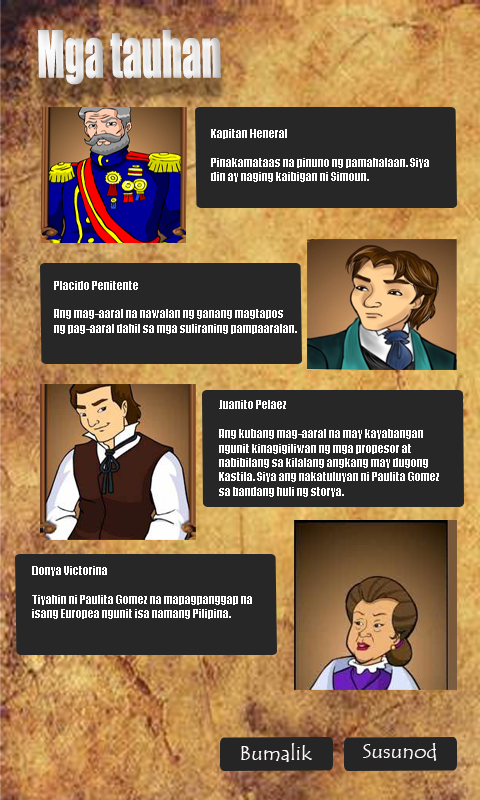
<style>
.page{position:relative;width:480px;height:800px;background:#272727}
.page>*{position:absolute;margin:0}
.t1{font:60px "Impact";color:#ffffff;scale:0.64 1}
.t2{font:12px "Impact";color:#ffffff}
.t3{font:20px "TempusSansITC";color:#fef8f8;scale:1.06 1}
</style>
<div class="page">
<p class="t1" style="left:38px;top:30px;width:183px;height:55px">Mga tauhan</p>
<p class="t2" style="left:211px;top:129px;width:218px;height:53px">Kapitan Heneral<br><br>Pinakamataas na pinuno ng pamahalaan. Siya <br>din ay naging kaibigan ni Simoun.</p>
<p class="t2" style="left:54px;top:281px;width:243px;height:53px">Placido Penitente<br><br>Ang mag-aaral na nawalan ng ganang magtapos <br>ng pag-aaral dahil sa mga suliraning pampaaralan.</p>
<p class="t2" style="left:219px;top:400px;width:220px;height:97px">Juanito Pelaez<br><br>Ang kubang mag-aaral na may kayabangan <br>ngunit kinagigiliwan ng mga propesor at <br>nabibilang sa kilalang angkang may dugong <br>Kastila. Siya ang nakatuluyan ni Paulita Gomez <br>sa bandang huli ng storya.</p>
<p class="t2" style="left:32px;top:566px;width:220px;height:53px">Donya Victorina<br><br>Tiyahin ni Paulita Gomez na mapagpanggap na <br>isang Europea ngunit isa namang Pilipina.</p>
<p class="t3" style="left:241px;top:743px;width:71px;height:19px">Bumalik</p>
<p class="t3" style="left:363px;top:743px;width:74px;height:18px">Susunod</p>
</div>
